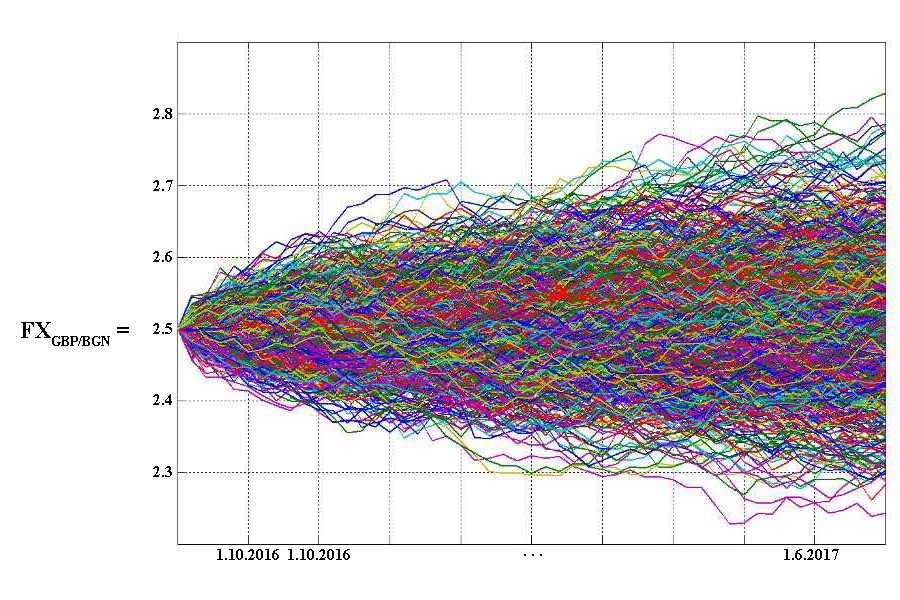
<style>
.page{position:relative;width:900px;height:600px;background:#ffffff}
.page>*{position:absolute;margin:0}
.t1{font:16px "TimesNewRomanPS-BoldMT";color:#000000}
.t2{font:24px "TimesNewRomanPS-BoldMT";color:#000000}
</style>
<div class="page">
<p class="t1" style="left:153px;top:108px;width:19px;height:11px">2.8</p>
<p class="t1" style="left:153px;top:180px;width:20px;height:11px">2.7</p>
<p class="t1" style="left:153px;top:251px;width:19px;height:11px">2.6</p>
<p class="t2" style="left:21px;top:322px;width:108px;height:24px">FXGBP/BGN =</p>
<p class="t1" style="left:153px;top:323px;width:19px;height:11px">2.5</p>
<p class="t1" style="left:153px;top:394px;width:19px;height:11px">2.4</p>
<p class="t1" style="left:153px;top:466px;width:19px;height:11px">2.3</p>
<p class="t1" style="left:217px;top:549px;width:62px;height:11px">1.10.2016</p>
<p class="t1" style="left:288px;top:549px;width:62px;height:11px">1.10.2016</p>
<p class="t1" style="left:524px;top:554px;width:18px;height:2px">. . .</p>
<p class="t1" style="left:784px;top:549px;width:55px;height:11px">1.6.2017</p>
</div>
